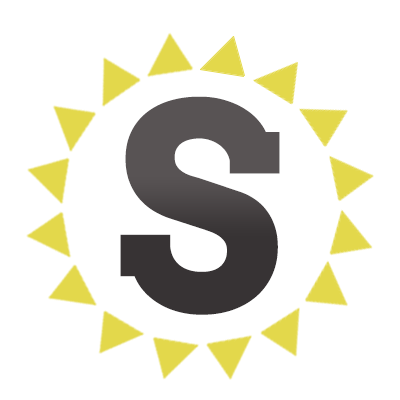
<style>
.page{position:relative;width:400px;height:400px;background:#ffffff}
.page>*{position:absolute;margin:0}
.t1{font:280.3px "Arvo-Bold";color:#484445}
</style>
<div class="page">
<p class="t1" style="left:120px;top:96px;width:160px;height:219px">S</p>
</div>
